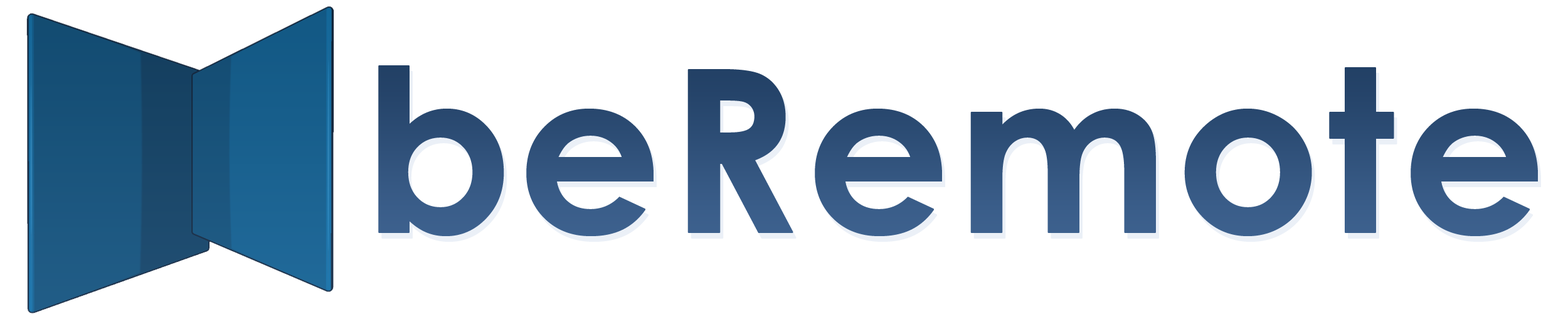
<style>
.page{position:relative;width:1568px;height:314px;background:#ffffff}
.page>*{position:absolute;margin:0}
.t1{font:225.8px "CenturyGothic-Bold";color:#32537d;font-weight:bold}
</style>
<div class="page">
<p class="t1" style="left:378px;top:65px;width:1160px;height:171px">beRemote</p>
</div>
